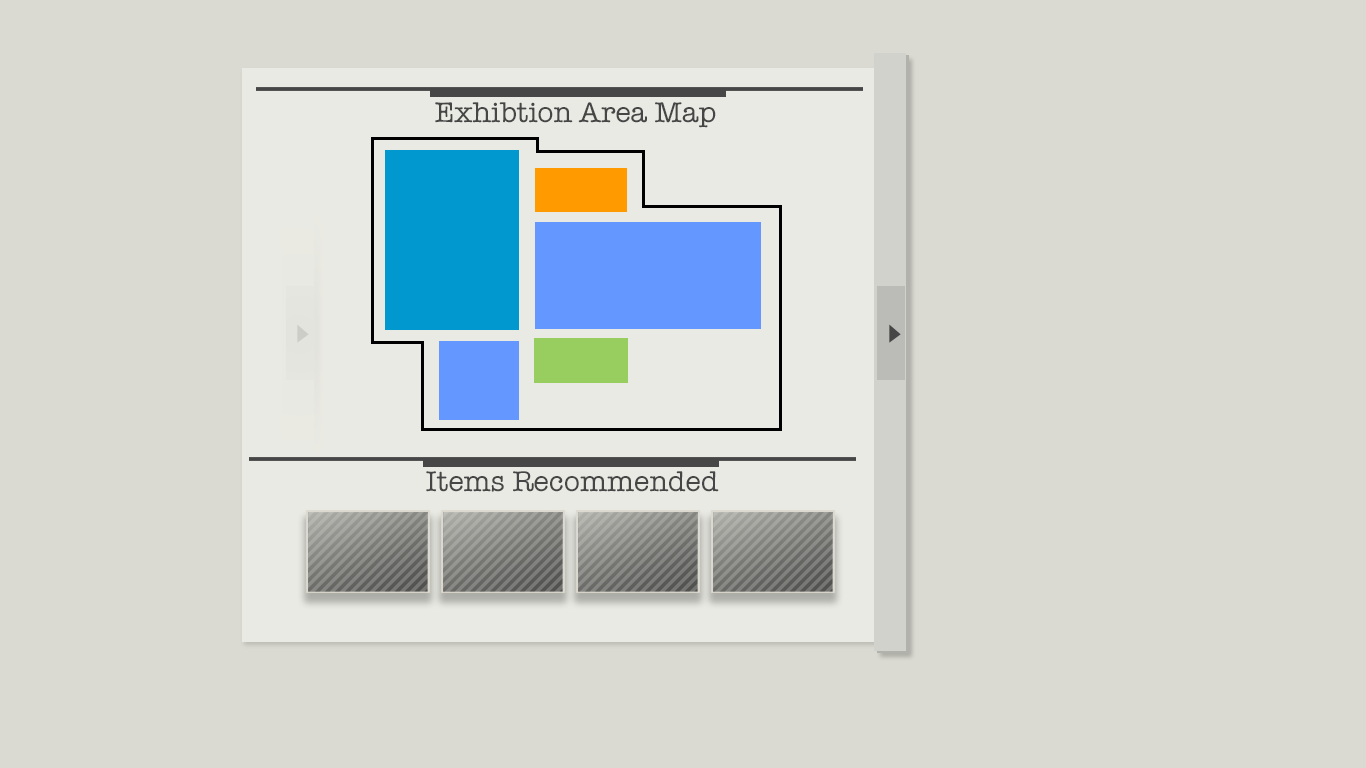
<style>
.page{position:relative;width:1366px;height:768px;background:#dadad2}
.page>*{position:absolute;margin:0}
.t1{font:29.2px "AmericanTypewriter";color:#464646}
</style>
<div class="page">
<p class="t1" style="left:435px;top:102px;width:281px;height:26px">Exhibtion Area Map</p>
<p class="t1" style="left:426px;top:471px;width:293px;height:21px">Items Recommended</p>
</div>
